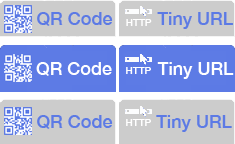
<style>
.page{position:relative;width:235px;height:144px;background:#cccccc}
.page>*{position:absolute;margin:0}
.t1{font:18px "HelveticaNeue-Medium";color:#5c7ae5}
.t2{font:10px "HelveticaNeue-Medium";color:#ffffff}
.t3{font:18px "HelveticaNeue-Medium";color:#ffffff}
</style>
<div class="page">
<p class="t1" style="left:37px;top:12px;width:76px;height:14px">QR Code</p>
<p class="t1" style="left:157px;top:12px;width:76px;height:17px">Tiny URL</p>
<p class="t2" style="left:126px;top:19px;width:26px;height:7px">HTTP</p>
<p class="t3" style="left:36px;top:62px;width:76px;height:14px">QR Code</p>
<p class="t3" style="left:157px;top:62px;width:77px;height:17px">Tiny URL</p>
<p class="t2" style="left:126px;top:67px;width:25px;height:7px">HTTP</p>
<p class="t1" style="left:37px;top:115px;width:76px;height:14px">QR Code</p>
<p class="t2" style="left:126px;top:119px;width:25px;height:7px">HTTP</p>
<p class="t1" style="left:156px;top:115px;width:76px;height:17px">Tiny URL</p>
</div>
